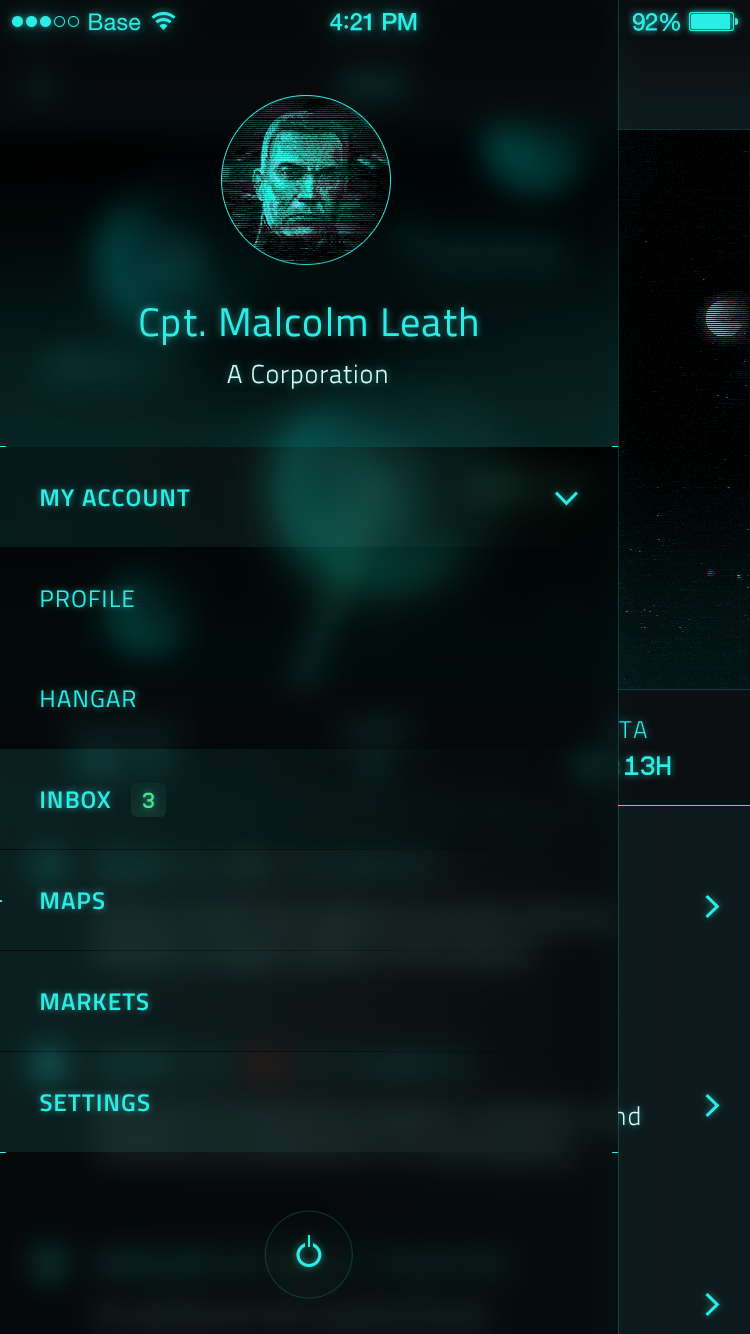
<style>
.page{position:relative;width:750px;height:1334px}
.page>*{position:absolute;margin:0}
.t1{font:23px "HelveticaNeue";letter-spacing:0.02em;color:#2bede6}
.t2{font:24px "HelveticaNeue-Medium";letter-spacing:-0.02em;color:#2bede6}
.t3{font:26px "Avenir-Medium";letter-spacing:-0.02em;color:#2bede6}
.t4{font:24px "HelveticaNeue";letter-spacing:-0.02em;color:#2bede6}
.t5{font:40px "Titillium-Regular";letter-spacing:0.03em;color:#2bede6}
.t6{font:26px "Titillium-Light";letter-spacing:0.04em;color:#d6fffd}
.t7{font:24px "Titillium-Semibold";letter-spacing:0.05em;color:#2bede6;text-transform:uppercase}
.t8{font:24px "Titillium-Regular";letter-spacing:0.05em;color:#2bede6;text-transform:uppercase}
.t9{font:26px "ProFontWindows";color:#4fe38b;text-transform:uppercase}
</style>
<div class="page">
<p class="t1" style="left:89px;top:13px;width:52px;height:18px">Base</p>
<p class="t2" style="left:330px;top:13px;width:87px;height:18px">4<span class="t3">:</span>21 PM</p>
<p class="t4" style="left:633px;top:13px;width:47px;height:18px">92%</p>
<p class="t5" style="left:140px;top:307px;width:337px;height:38px">Cpt. Malcolm Leath</p>
<p class="t6" style="left:227px;top:364px;width:160px;height:25px">A Corporation</p>
<p class="t7" style="left:41px;top:489px;width:149px;height:18px">MY ACCOUNT</p>
<p class="t8" style="left:41px;top:590px;width:93px;height:18px">PROFILE</p>
<p class="t8" style="left:41px;top:690px;width:95px;height:18px">HANGAR</p>
<p class="t7" style="left:41px;top:791px;width:70px;height:18px">INBOX</p>
<p class="t9" style="left:143px;top:792px;width:11px;height:16px">3</p>
<p class="t7" style="left:41px;top:892px;width:63px;height:18px">MAPS</p>
<p class="t7" style="left:41px;top:993px;width:107px;height:18px">MARKETS</p>
<p class="t7" style="left:40px;top:1094px;width:109px;height:18px">SETTINGS</p>
</div>
